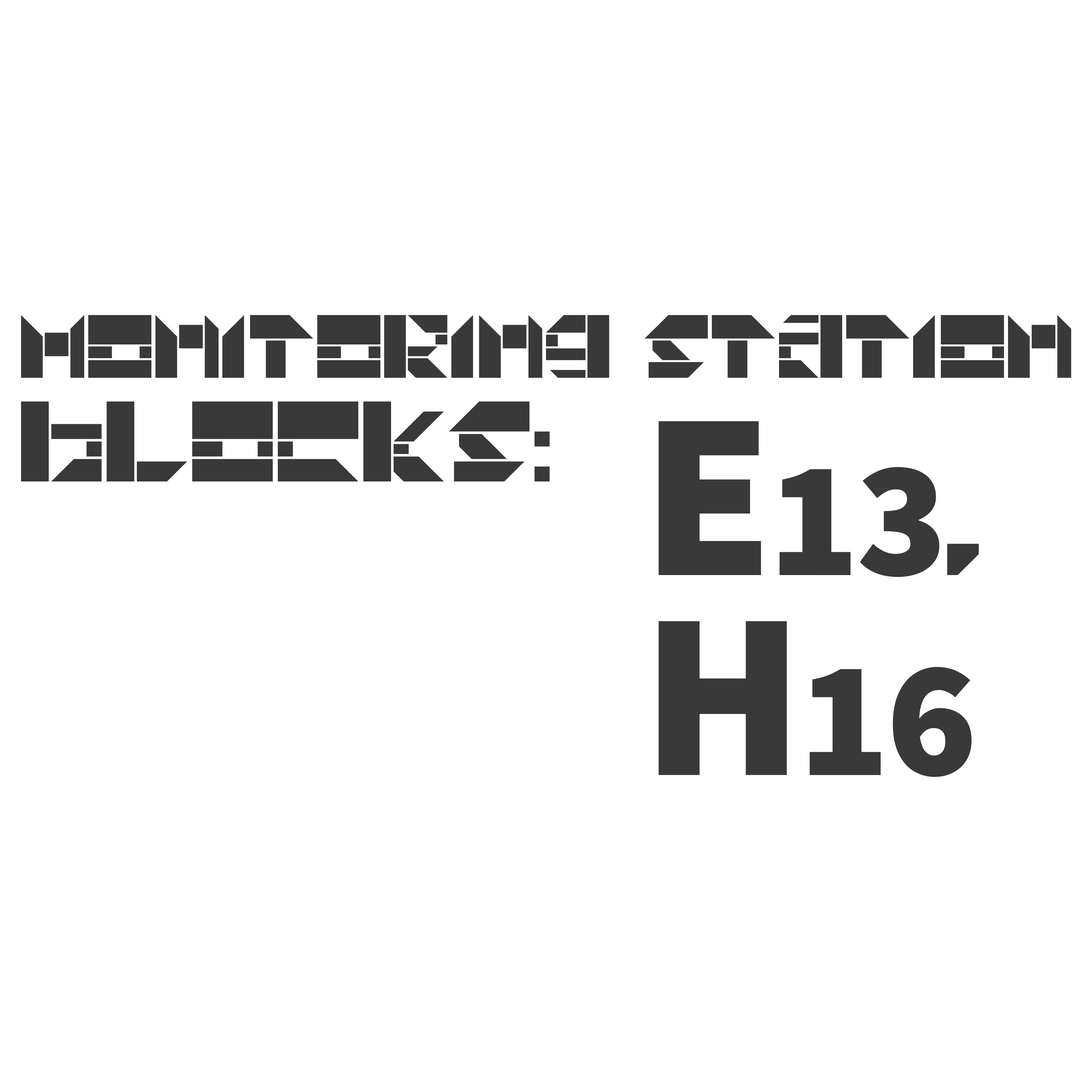
<style>
.page{position:relative;width:1092px;height:1092px;background:#ffffff}
.page>*{position:absolute;margin:0}
.t1{font:62.7px "Universal-Union";color:#393939}
.t2{font:80px "Universal-Union";color:#393939}
.t3{font:167px/199.9px "Assistant-ExtraBold";color:#393939}
.t4{font:236.6px/199.9px "Assistant-ExtraBold";color:#393939}
.t5{font:167px/199.9px "Universal-Union";color:#393939}
</style>
<div class="page">
<p class="t1" style="left:21px;top:315px;width:1050px;height:63px">Monitoring Station</p>
<p class="t2" style="left:21px;top:401px;width:529px;height:80px">Blocks:</p>
<p class="t3" style="left:658px;top:421px;width:321px;height:356px"><span class="t4">E</span>13<span class="t5">,<br></span><span class="t4">H</span>16</p>
</div>
